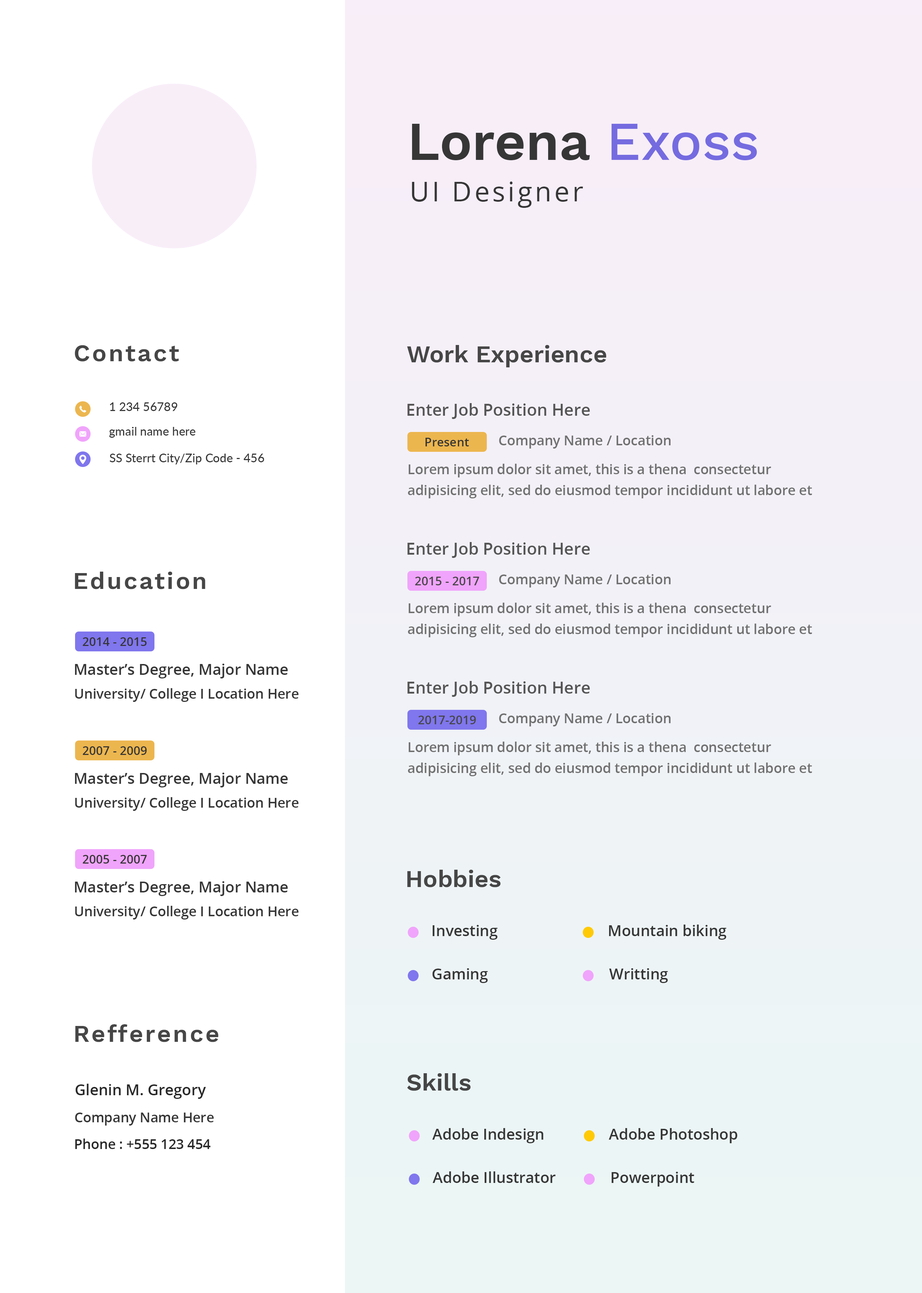
<style>
.page{position:relative;width:922px;height:1293px;background:#ffffff}
.page>*{position:absolute;margin:0}
.t1{font:54.1px "WorkSans-SemiBold";color:#363636}
.t2{font:54.1px "WorkSans-Medium";color:#756be0}
.t3{font:27.1px "OpenSans";letter-spacing:0.1em;color:#363636}
.t4{font:24.1px "WorkSans-SemiBold";letter-spacing:0.08em;color:#464646}
.t5{font:24.1px "WorkSans-SemiBold";color:#464646}
.t6{font:12px "Lato-Medium";color:#363636}
.t7{font:16.5px "OpenSans-Semibold";color:#555555}
.t8{font:12px "OpenSans-Semibold";color:#363636}
.t9{font:13.5px "OpenSans-Semibold";color:#707070}
.t10{font:13.5px/21.1px "OpenSans-Semibold";color:#707070}
.t11{font:12px "OpenSans-Semibold";color:#464646}
.t12{font:12px "OpenSans-Semibold";color:#363636;text-transform:uppercase}
.t13{font:15px "OpenSans-Semibold";color:#363636}
.t14{font:13.5px "OpenSans-Semibold";color:#363636}
.t15{font:15px "OpenSans-Semibold";color:#282828}
.t16{font:13.5px "OpenSans-Semibold";color:#282828}
</style>
<div class="page">
<p class="t1" style="left:412px;top:124px;width:345px;height:36px">Lorena <span class="t2">Exoss</span></p>
<p class="t3" style="left:412px;top:182px;width:171px;height:26px">UI Designer</p>
<p class="t4" style="left:75px;top:345px;width:104px;height:17px">Contact</p>
<p class="t5" style="left:407px;top:345px;width:199px;height:22px">Work Experience</p>
<p class="t6" style="left:110px;top:402px;width:68px;height:9px">1 234 56789</p>
<p class="t7" style="left:407px;top:403px;width:183px;height:16px">Enter Job Position Here</p>
<p class="t6" style="left:109px;top:427px;width:87px;height:11px">gmail name here</p>
<p class="t8" style="left:426px;top:438px;width:43px;height:8px">Present</p>
<p class="t9" style="left:499px;top:435px;width:172px;height:14px">Company Name / Location</p>
<p class="t6" style="left:110px;top:454px;width:154px;height:10px">SS Sterrt City/Zip Code - 456</p>
<p class="t10" style="left:408px;top:464px;width:404px;height:34px">Lorem ipsum dolor sit amet, this is a thena  consectetur adipisicing elit, sed do eiusmod tempor incididunt ut labore et dolore</p>
<p class="t7" style="left:407px;top:542px;width:183px;height:16px">Enter Job Position Here</p>
<p class="t4" style="left:75px;top:572px;width:130px;height:17px">Education</p>
<p class="t11" style="left:415px;top:577px;width:64px;height:8px">2015 - 2017</p>
<p class="t9" style="left:499px;top:574px;width:172px;height:14px">Company Name / Location</p>
<p class="t10" style="left:408px;top:603px;width:404px;height:34px">Lorem ipsum dolor sit amet, this is a thena  consectetur adipisicing elit, sed do eiusmod tempor incididunt ut labore et dolore</p>
<p class="t12" style="left:83px;top:637px;width:64px;height:9px">2014 - 2015</p>
<p class="t13" style="left:75px;top:664px;width:213px;height:15px">Master’s Degree, Major Name</p>
<p class="t14" style="left:75px;top:688px;width:224px;height:14px">University/ College I Location Here</p>
<p class="t7" style="left:407px;top:681px;width:183px;height:16px">Enter Job Position Here</p>
<p class="t9" style="left:499px;top:713px;width:172px;height:14px">Company Name / Location</p>
<p class="t11" style="left:418px;top:716px;width:58px;height:8px">2017-2019</p>
<p class="t12" style="left:83px;top:746px;width:64px;height:9px">2007 - 2009</p>
<p class="t10" style="left:408px;top:742px;width:404px;height:34px">Lorem ipsum dolor sit amet, this is a thena  consectetur adipisicing elit, sed do eiusmod tempor incididunt ut labore et dolore</p>
<p class="t13" style="left:75px;top:773px;width:213px;height:15px">Master’s Degree, Major Name</p>
<p class="t14" style="left:75px;top:797px;width:224px;height:14px">University/ College I Location Here</p>
<p class="t12" style="left:83px;top:855px;width:64px;height:9px">2005 - 2007</p>
<p class="t5" style="left:407px;top:870px;width:94px;height:17px">Hobbies</p>
<p class="t13" style="left:75px;top:881px;width:213px;height:15px">Master’s Degree, Major Name</p>
<p class="t14" style="left:75px;top:906px;width:224px;height:14px">University/ College I Location Here</p>
<p class="t13" style="left:433px;top:925px;width:65px;height:15px">Investing</p>
<p class="t13" style="left:609px;top:925px;width:118px;height:15px">Mountain biking</p>
<p class="t13" style="left:432px;top:968px;width:56px;height:15px">Gaming</p>
<p class="t13" style="left:609px;top:968px;width:59px;height:15px">Writting</p>
<p class="t4" style="left:75px;top:1024px;width:143px;height:18px">Refference</p>
<p class="t5" style="left:407px;top:1073px;width:64px;height:18px">Skills</p>
<p class="t15" style="left:75px;top:1084px;width:131px;height:15px">Glenin M. Gregory</p>
<p class="t14" style="left:75px;top:1113px;width:139px;height:13px">Company Name Here</p>
<p class="t13" style="left:432px;top:1128px;width:112px;height:15px">Adobe Indesign</p>
<p class="t13" style="left:609px;top:1128px;width:128px;height:15px">Adobe Photoshop</p>
<p class="t16" style="left:75px;top:1139px;width:135px;height:10px">Phone : +555 123 454</p>
<p class="t13" style="left:433px;top:1172px;width:123px;height:11px">Adobe Illustrator</p>
<p class="t13" style="left:612px;top:1172px;width:82px;height:15px">Powerpoint</p>
</div>
